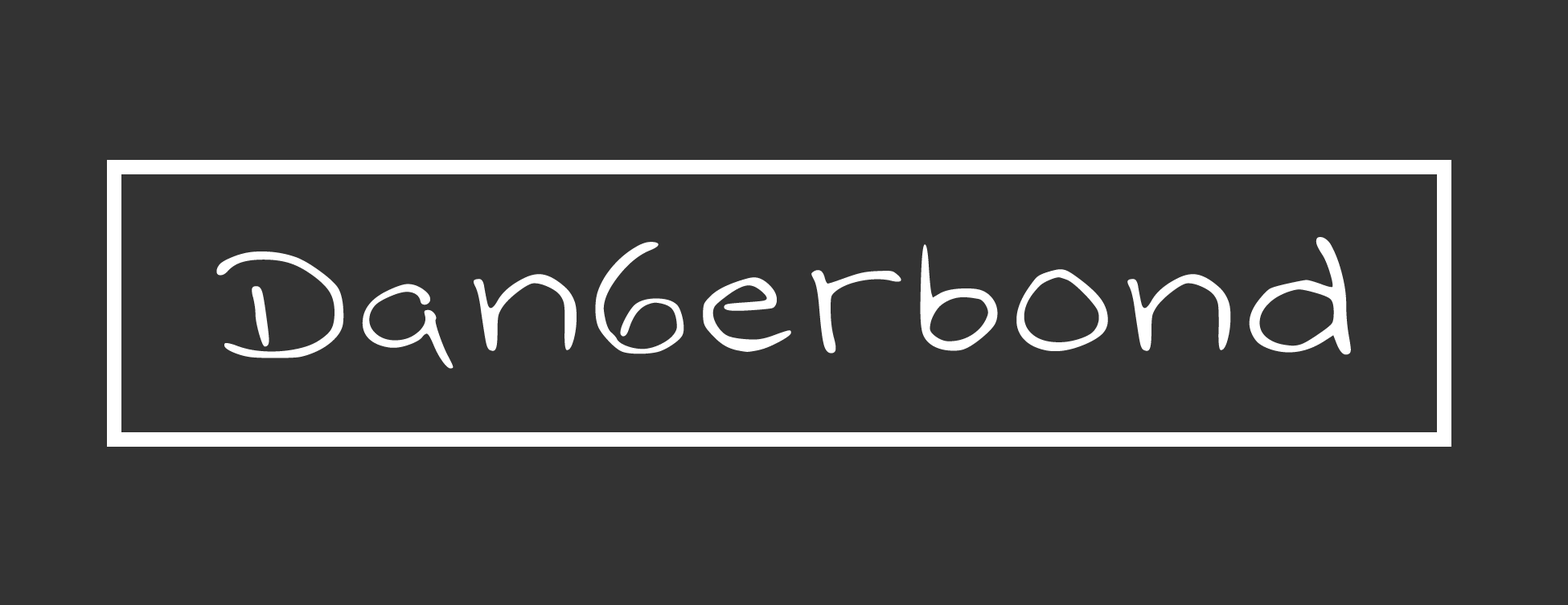
<style>
.page{position:relative;width:1568px;height:605px;background:#333333}
.page>*{position:absolute;margin:0}
.t1{font:162.3px "Dan6erfont-Regular";color:#ffffff;scale:1.35 1}
</style>
<div class="page">
<p class="t1" style="left:216px;top:237px;width:1135px;height:132px">Dan6erbond</p>
</div>
